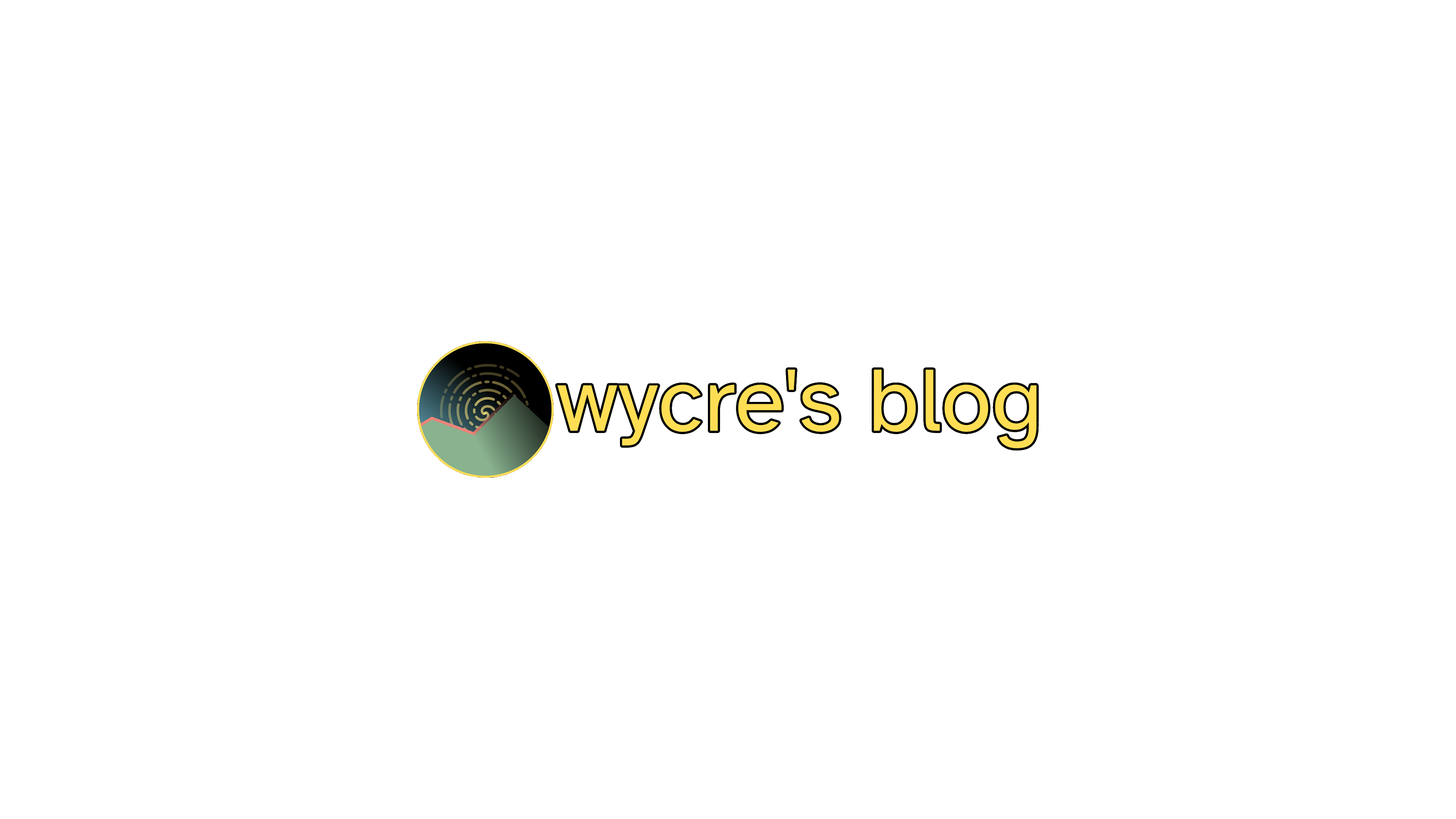
<style>
.page{position:relative;width:1456px;height:819px;background:#ffffff}
.page>*{position:absolute;margin:0}
.t1{font:91.5px "AtkinsonHyperlegible-Regular";color:#ffde54}
</style>
<div class="page">
<p class="t1" style="left:557px;top:369px;width:480px;height:80px">wycre's blog</p>
</div>
